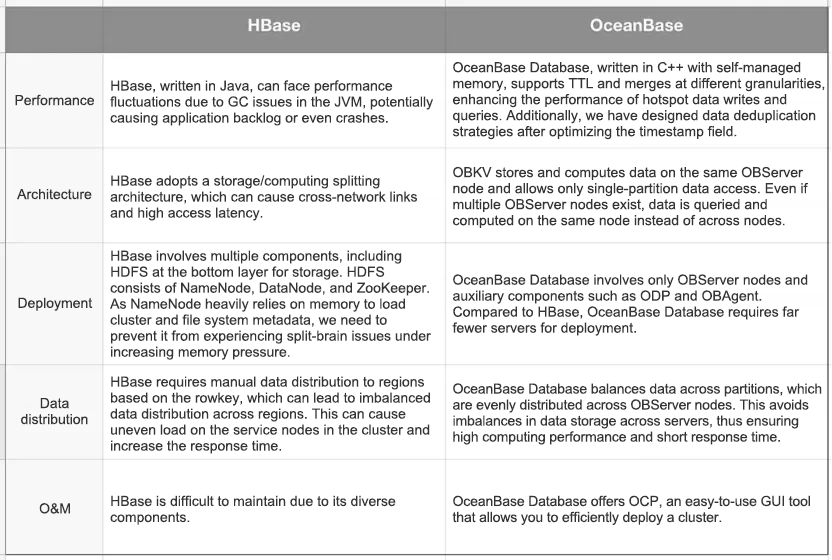
<style>
.page{position:relative;width:832px;height:560px;background:#ffffff}
.page>*{position:absolute;margin:0}
.t1{font:14px/16px "ArialMT";color:#343434}
.t2{font:14px "ArialMT";color:#343434}
.t3{font:14px/16px "ArialMT";letter-spacing:-0.01em;color:#343434}
</style>
<div class="page">
<p class="t1" style="left:453px;top:62px;width:372px;height:78px">OceanBase Database, written in C++ with self-managed memory, supports TTL and merges at different granularities, enhancing the performance of hotspot data writes and queries. Additionally, we have designed data deduplication strategies after optimizing the timestamp field.</p>
<p class="t1" style="left:110px;top:80px;width:323px;height:46px">HBase, written in Java, can face performance fluctuations due to GC issues in the JVM, potentially causing application backlog or even crashes.</p>
<p class="t2" style="left:15px;top:94px;width:79px;height:12px">Performance</p>
<p class="t1" style="left:453px;top:166px;width:355px;height:62px">OBKV stores and computes data on the same OBServer node and allows only single-partition data access. Even if multiple OBServer nodes exist, data is queried and computed on the same node instead of across nodes.</p>
<p class="t1" style="left:110px;top:175px;width:307px;height:46px">HBase adopts a storage/computing splitting architecture, which can cause cross-network links and high access latency.</p>
<p class="t2" style="left:17px;top:189px;width:75px;height:11px">Architecture</p>
<p class="t1" style="left:110px;top:250px;width:321px;height:110px">HBase involves multiple components, including HDFS at the bottom layer for storage. HDFS consists of NameNode, DataNode, and ZooKeeper. As NameNode heavily relies on memory to load cluster and file system metadata, we need to prevent it from experiencing split-brain issues under increasing memory pressure.</p>
<p class="t1" style="left:452px;top:274px;width:356px;height:62px">OceanBase Database involves only OBServer nodes and auxiliary components such as ODP and OBAgent. Compared to HBase, OceanBase Database requires far fewer servers for deployment.</p>
<p class="t2" style="left:18px;top:297px;width:75px;height:14px">Deployment</p>
<p class="t1" style="left:110px;top:376px;width:320px;height:78px">HBase requires manual data distribution to regions based on the rowkey, which can lead to imbalanced data distribution across regions. This can cause uneven load on the service nodes in the cluster and increase the response time.</p>
<p class="t3" style="left:453px;top:383px;width:369px;height:62px">OceanBase Database balances data across partitions, which are evenly distributed across OBServer nodes. This avoids imbalances in data storage across servers, thus ensuring high computing performance and short response time.</p>
<p class="t1" style="left:21px;top:398px;width:67px;height:27px;text-align:center">Data distribution</p>
<p class="t1" style="left:110px;top:495px;width:286px;height:30px">HBase is difficult to maintain due to its diverse components.</p>
<p class="t3" style="left:452px;top:495px;width:358px;height:30px">OceanBase Database offers OCP, an easy-to-use GUI tool that allows you to efficiently deploy a cluster.</p>
<p class="t2" style="left:39px;top:503px;width:31px;height:11px">O&amp;M</p>
</div>
